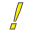
<style>
.page{position:relative;width:32px;height:32px;background:#ffffff}
.page>*{position:absolute;margin:0}
.t1{font:37.5px "HelveticaNeue-BoldItalic";letter-spacing:0.01em;font-weight:bold;font-style:italic;scale:0.83 1}
</style>
<div class="page">
<p class="t1" style="left:9px;top:2px;width:15px;height:28px">!</p>
</div>
